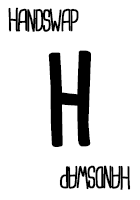
<style>
.page{position:relative;width:140px;height:200px;background:#ffffff}
.page>*{position:absolute;margin:0}
.t1{font:28.7px "CardenioModern-Reg";letter-spacing:-0.1em;color:#000000;text-transform:uppercase;font-weight:bold;scale:0.87 1}
.t2{font:115px "CardenioModern-Bold";letter-spacing:-0.1em;color:#000000;text-transform:uppercase;font-weight:bold;scale:0.87 1}
</style>
<div class="page">
<p class="t1" style="left:8px;top:7px;width:71px;height:25px">handswap</p>
<p class="t2" style="left:48px;top:50px;width:43px;height:97px">H</p>
<p class="t1" style="left:59px;top:165px;width:72px;height:25px;rotate:180deg">handswap</p>
</div>
